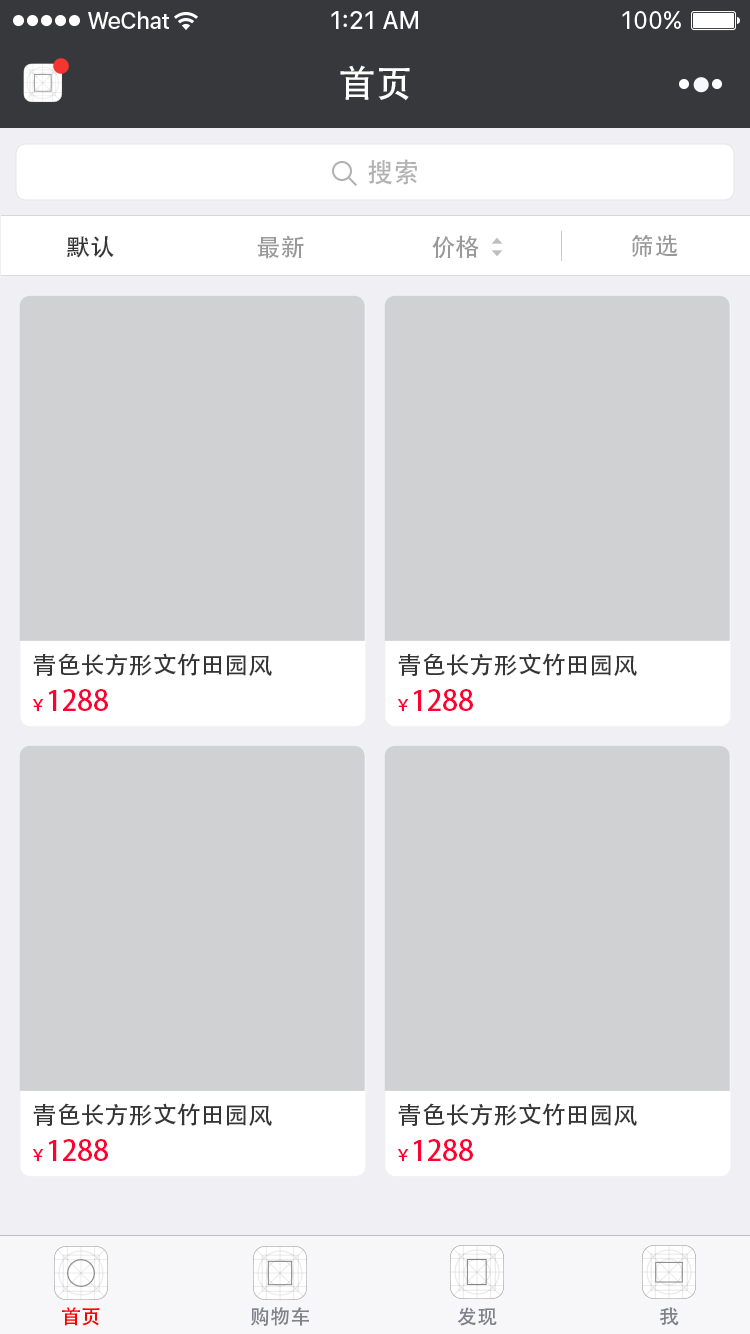
<style>
.page{position:relative;width:750px;height:1334px;background:#d0d1d2}
.page>*{position:absolute;margin:0}
.t1{font:37px "AdobeHeitiStd-Regular";color:#ffffff}
.t2{font:26px "AdobeHeitiStd-Regular";color:#b2b2b2}
.t3{font:24px "AdobeHeitiStd-Regular";color:#353535}
.t4{font:24px "AdobeHeitiStd-Regular";color:#999999}
.t5{font:28px "AdobeHeitiStd-Regular";color:#ff0033}
.t6{font:16px "AdobeHeitiStd-Regular";color:#ff0033}
.t7{font:20px "AdobeHeitiStd-Regular";color:#ff0000}
.t8{font:20px "AdobeHeitiStd-Regular";color:#7f8389}
</style>
<div class="page">
<p class="t1" style="left:340px;top:65px;width:70px;height:36px">首页</p>
<p class="t2" style="left:368px;top:159px;width:49px;height:26px">搜索</p>
<p class="t3" style="left:67px;top:236px;width:47px;height:22px">默认</p>
<p class="t4" style="left:257px;top:236px;width:47px;height:23px">最新</p>
<p class="t4" style="left:432px;top:235px;width:47px;height:24px">价格</p>
<p class="t4" style="left:631px;top:234px;width:47px;height:23px">筛选</p>
<p class="t3" style="left:33px;top:653px;width:239px;height:24px">青色长方形文竹田园风</p>
<p class="t3" style="left:398px;top:653px;width:239px;height:24px">青色长方形文竹田园风</p>
<p class="t5" style="left:33px;top:689px;width:75px;height:23px"><span class="t6">￥</span>1288</p>
<p class="t5" style="left:398px;top:689px;width:75px;height:23px"><span class="t6">￥</span>1288</p>
<p class="t3" style="left:33px;top:1103px;width:239px;height:24px">青色长方形文竹田园风</p>
<p class="t3" style="left:398px;top:1103px;width:239px;height:24px">青色长方形文竹田园风</p>
<p class="t5" style="left:33px;top:1139px;width:75px;height:23px"><span class="t6">￥</span>1288</p>
<p class="t5" style="left:398px;top:1139px;width:75px;height:23px"><span class="t6">￥</span>1288</p>
<p class="t7" style="left:62px;top:1307px;width:38px;height:19px">首页</p>
<p class="t8" style="left:251px;top:1307px;width:58px;height:19px">购物车</p>
<p class="t8" style="left:457px;top:1307px;width:40px;height:19px">发现</p>
<p class="t8" style="left:660px;top:1307px;width:19px;height:19px">我</p>
</div>
